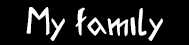
<style>
.page{position:relative;width:189px;height:45px;background:#000000}
.page>*{position:absolute;margin:0}
.t1{font:34.9px "AcadianRunes-Regular";color:#ffffff}
</style>
<div class="page">
<p class="t1" style="left:26px;top:7px;width:137px;height:34px">My family</p>
</div>
